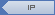
<style>
.page{position:relative;width:55px;height:15px;background:#5176b5}
.page>*{position:absolute;margin:0}
.t1{font:8px "BitDustTwo";color:#666666}
</style>
<div class="page">
<p class="t1" style="left:28px;top:5px;width:7px;height:5px">IP</p>
</div>
